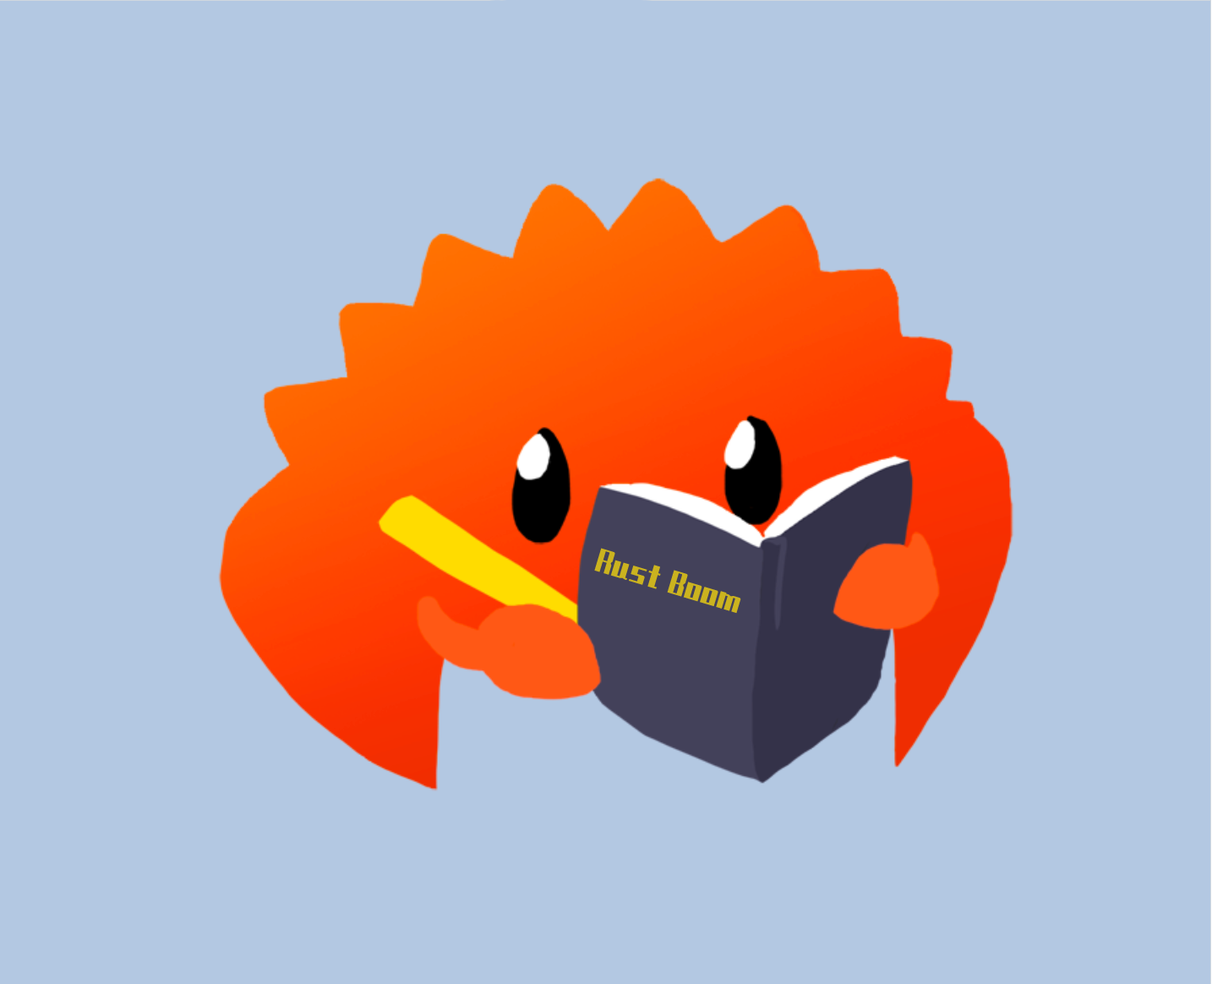
<style>
.page{position:relative;width:1212px;height:984px;background:#b3c8e2}
.page>*{position:absolute;margin:0}
.t1{font:25.4px "ZhenyanGB-Regular";color:#cbb31f}
</style>
<div class="page">
<p class="t1" style="left:594px;top:548px;width:67px;height:41px;rotate:17deg">Rust</p>
<p class="t1" style="left:667px;top:570px;width:74px;height:44px;rotate:17deg">Boom</p>
</div>
